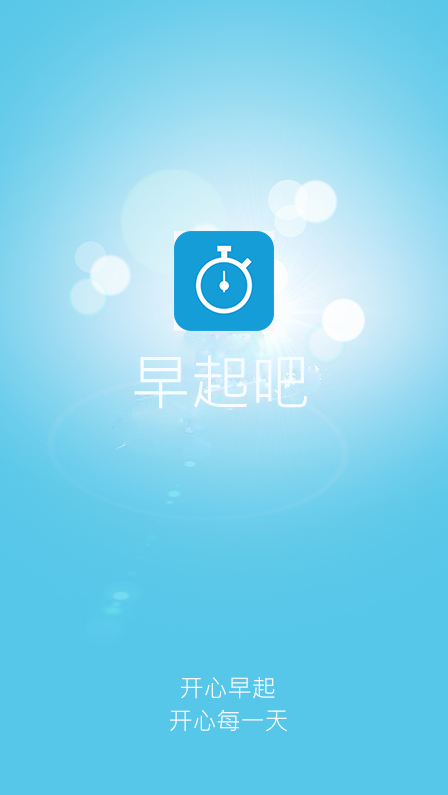
<style>
.page{position:relative;width:448px;height:795px;background:#56c7e9}
.page>*{position:absolute;margin:0}
.t1{font:60px "MicrosoftJhengHeiRegular";color:#f6fcff}
.t2{font:24px "MicrosoftJhengHeiRegular";color:#f6fcff}
.t3{font:30px "MicrosoftJhengHeiRegular";color:#f6fcff}
</style>
<div class="page">
<p class="t1" style="left:134px;top:355px;width:173px;height:54px">早起吧</p>
<p class="t2" style="left:181px;top:677px;width:94px;height:22px"><span class="t3">           </span>开心早起</p>
<p class="t2" style="left:170px;top:709px;width:117px;height:23px">开心每一天</p>
</div>
